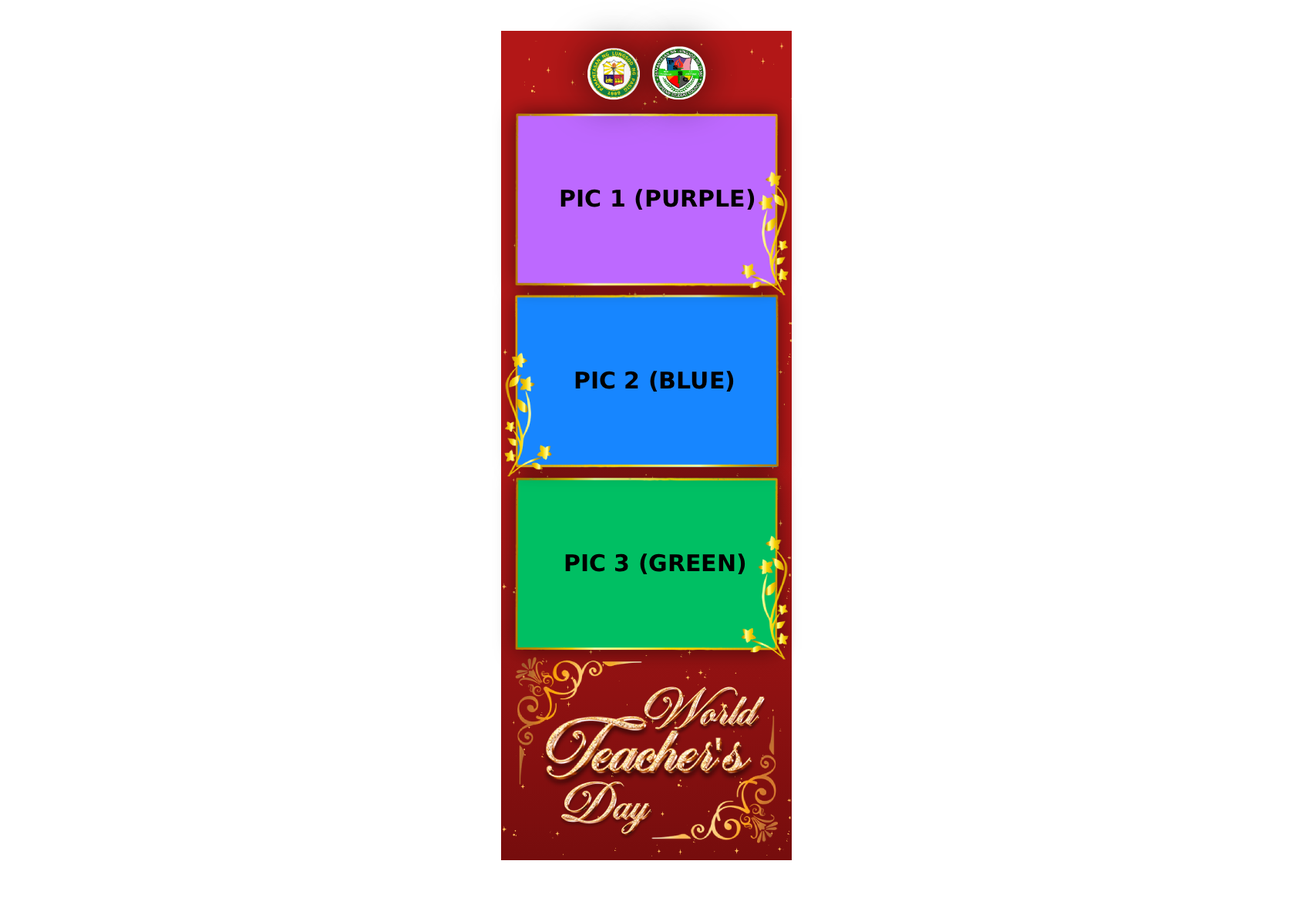
<style>
.page{position:relative;width:1299px;height:918px;background:#ffffff}
.page>*{position:absolute;margin:0}
.t1{font:23.1px "CooperBT-Bold";color:#000000}
</style>
<div class="page">
<p class="t1" style="left:560px;top:189px;width:195px;height:21px">PIC 1 (PURPLE)</p>
<p class="t1" style="left:575px;top:371px;width:159px;height:21px">PIC 2 (BLUE)</p>
<p class="t1" style="left:565px;top:553px;width:180px;height:21px">PIC 3 (GREEN)</p>
</div>
